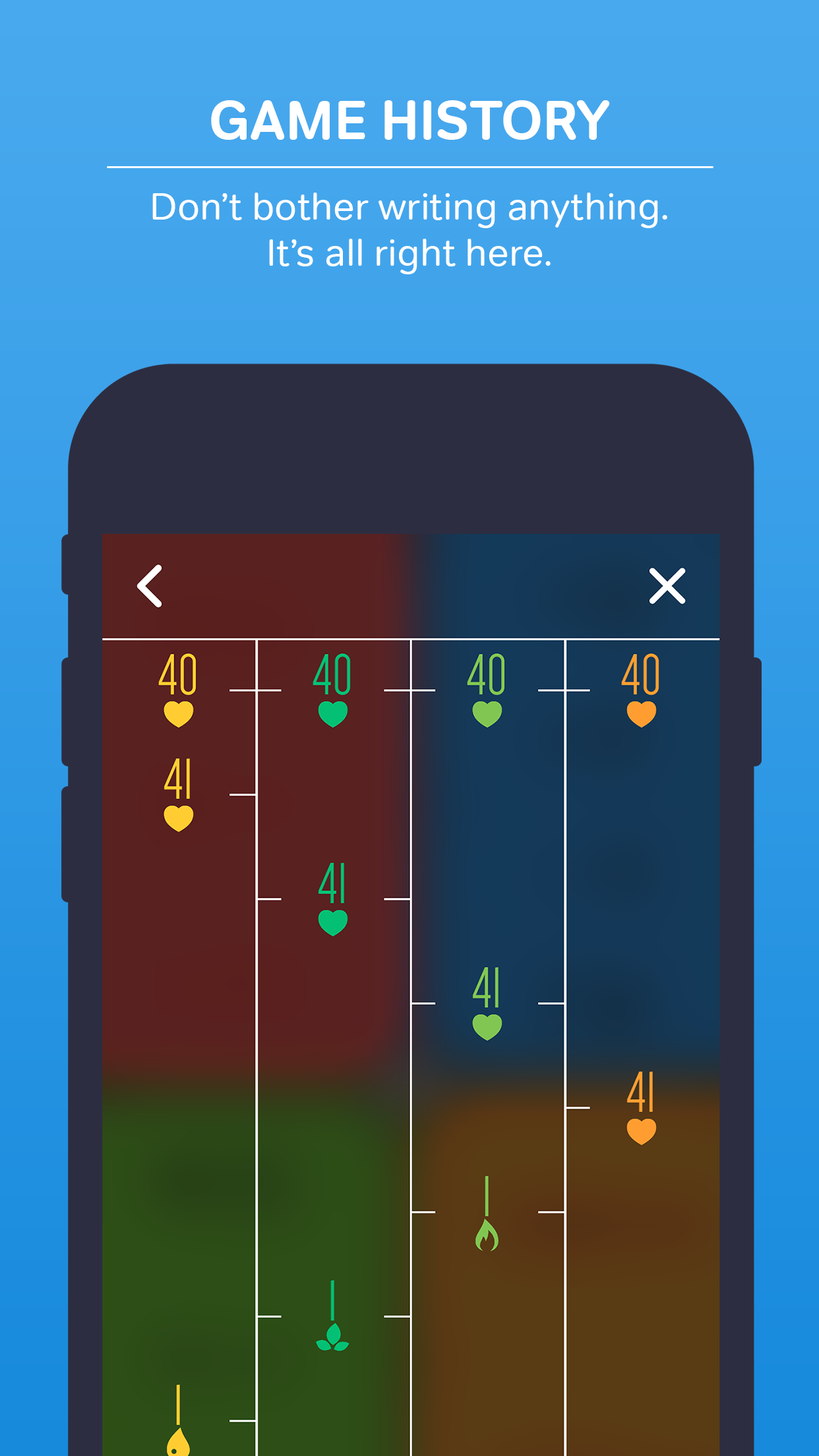
<style>
.page{position:relative;width:819px;height:1456px}
.page>*{position:absolute;margin:0}
.t1{font:55px "Tondo-Bold";color:#ffffff}
.t2{font:38.5px "Tondo-Regular";color:#ffffff}
</style>
<div class="page">
<p class="t1" style="left:211px;top:100px;width:399px;height:40px">GAME HISTORY</p>
<p class="t2" style="left:152px;top:193px;width:515px;height:81px;text-align:center">Don’t bother writing anything.<br>It’s all right here.</p>
</div>
